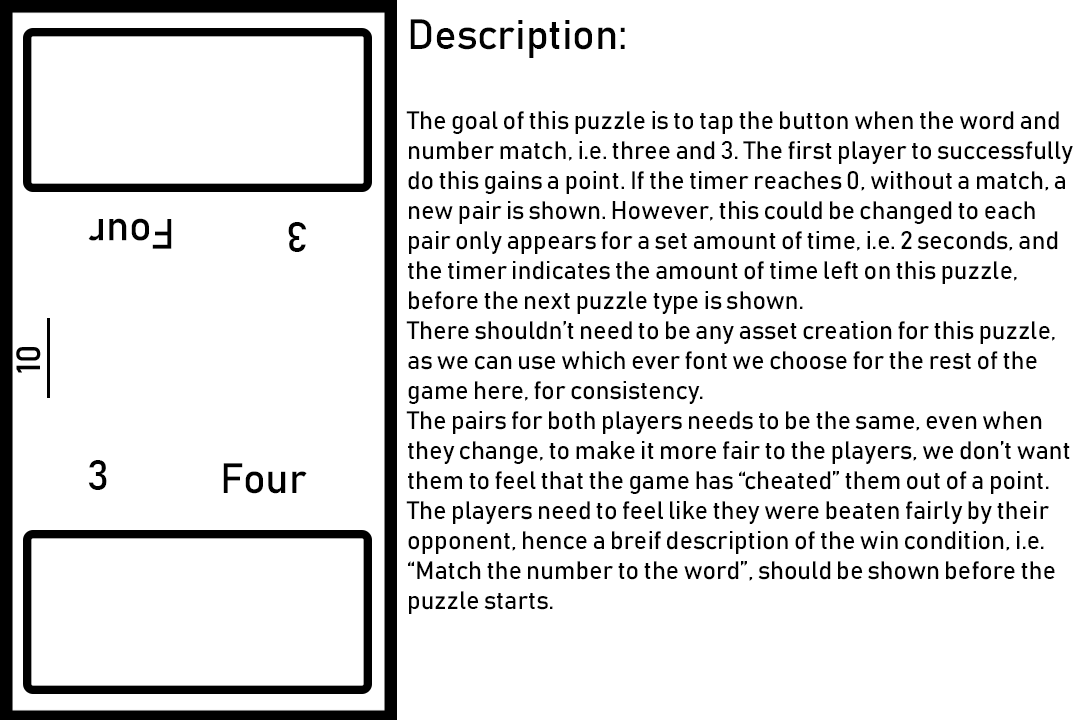
<style>
.page{position:relative;width:1080px;height:720px;background:#ffffff}
.page>*{position:absolute;margin:0}
.t1{font:25px "Bahnschrift";color:#010101}
.t2{font:41.7px "Bahnschrift";color:#010101}
.t3{font:41.7px "Bahnschrift";color:#000000}
</style>
<div class="page">
<p class="t1" style="left:406px;top:19px;width:667px;height:595px"><span class="t2">Description:<br><br></span>The goal of this puzzle is to tap the button when the word and<br>number match, i.e. three and 3. The first player to successfully<br>do this gains a point. If the timer reaches 0, without a match, a<br>new pair is shown. However, this could be changed to each<br>pair only appears for a set amount of time, i.e. 2 seconds, and<br>the timer indicates the amount of time left on this puzzle,<br>before the next puzzle type is shown.<br>There shouldn’t need to be any asset creation for this puzzle,<br>as we can use which ever font we choose for the rest of the<br>game here, for consistency.<br>The pairs for both players needs to be the same, even when<br>they change, to make it more fair to the players, we don’t want<br>them to feel that the game has “cheated” them out of a point. <br>The players need to feel like they were beaten fairly by their <br>opponent, hence a breif description of the win condition, i.e.<br>“Match the number to the word”, should be shown before the<br>puzzle starts.</p>
<p class="t3" style="left:88px;top:218px;width:84px;height:31px;rotate:180deg">Four</p>
<p class="t3" style="left:288px;top:222px;width:19px;height:30px;rotate:180deg">3</p>
<p class="t3" style="left:88px;top:460px;width:19px;height:30px">3</p>
<p class="t3" style="left:223px;top:463px;width:84px;height:31px">Four</p>
</div>
